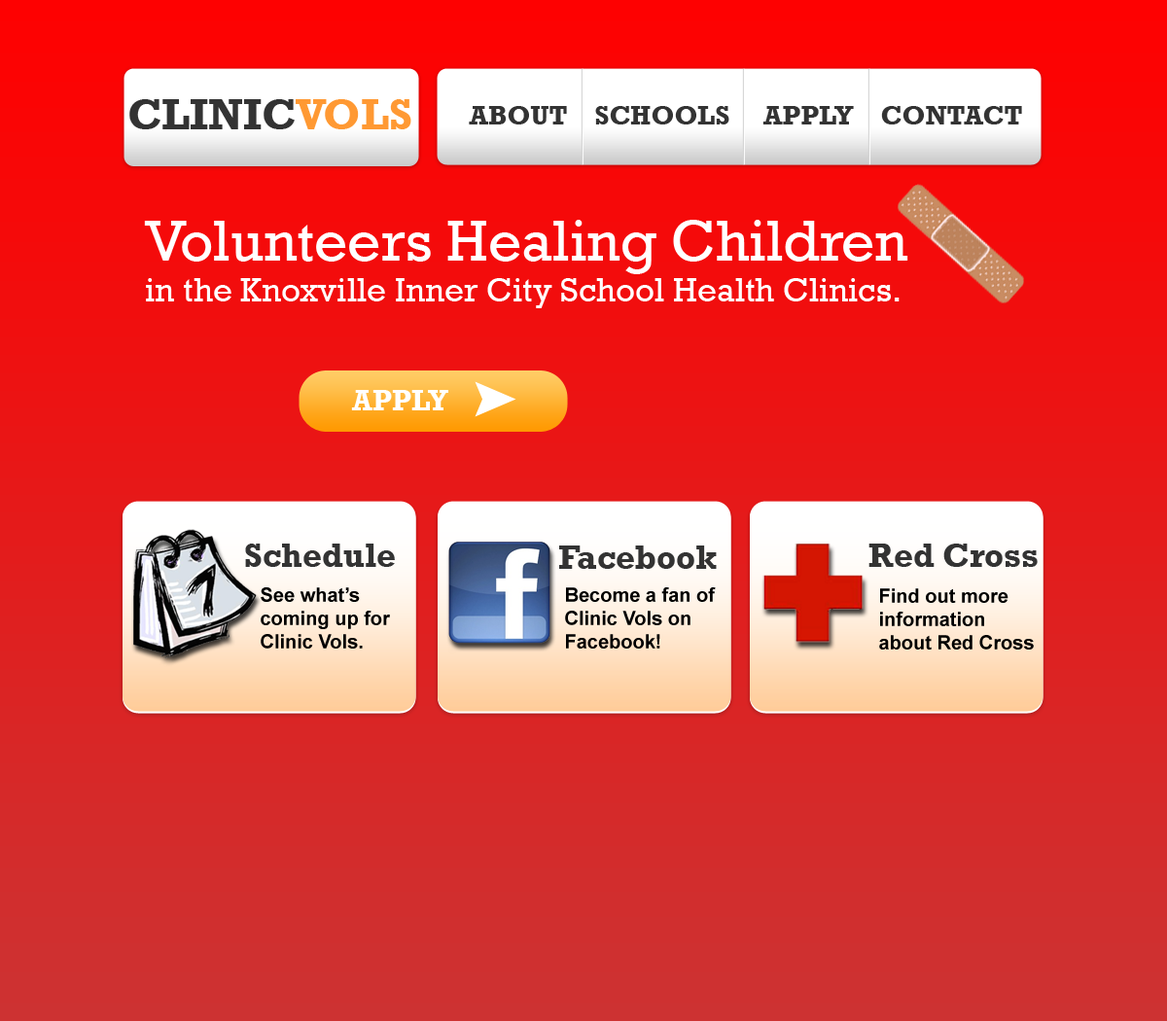
<style>
.page{position:relative;width:1167px;height:1021px}
.page>*{position:absolute;margin:0}
.t1{font:43.8px "Rockwell-Bold";color:#333333}
.t2{font:43.8px "Rockwell-Bold";color:#ff9933}
.t3{font:27.2px "Rockwell-Bold";color:#333333}
.t4{font:34px "Rockwell";color:#ffffff}
.t5{font:58.4px "Rockwell";color:#ffffff}
.t6{font:29.2px "Rockwell-Bold";color:#ffffff}
.t7{font:34px "Rockwell-Bold";color:#333333}
.t8{font:19.5px "Arial-BoldMT";color:#000000}
</style>
<div class="page">
<p class="t1" style="left:129px;top:99px;width:283px;height:30px">CLINIC<span class="t2">VOLS</span></p>
<p class="t3" style="left:469px;top:106px;width:553px;height:19px">ABOUT    SCHOOLS     APPLY    CONTACT</p>
<p class="t4" style="left:144px;top:220px;width:765px;height:88px"><span class="t5">Volunteers Healing Children <br></span>in the Knoxville Inner City School Health Clinics.</p>
<p class="t6" style="left:351px;top:390px;width:97px;height:21px">APPLY</p>
<p class="t7" style="left:245px;top:544px;width:150px;height:23px">Schedule</p>
<p class="t7" style="left:559px;top:546px;width:158px;height:23px">Facebook</p>
<p class="t7" style="left:869px;top:544px;width:169px;height:23px">Red Cross</p>
<p class="t8" style="left:261px;top:588px;width:129px;height:61px">See what’s coming up for Clinic Vols.</p>
<p class="t8" style="left:565px;top:588px;width:151px;height:61px">Become a fan of Clinic Vols on Facebook!</p>
<p class="t8" style="left:879px;top:589px;width:155px;height:61px">Find out more information about Red Cross</p>
</div>
